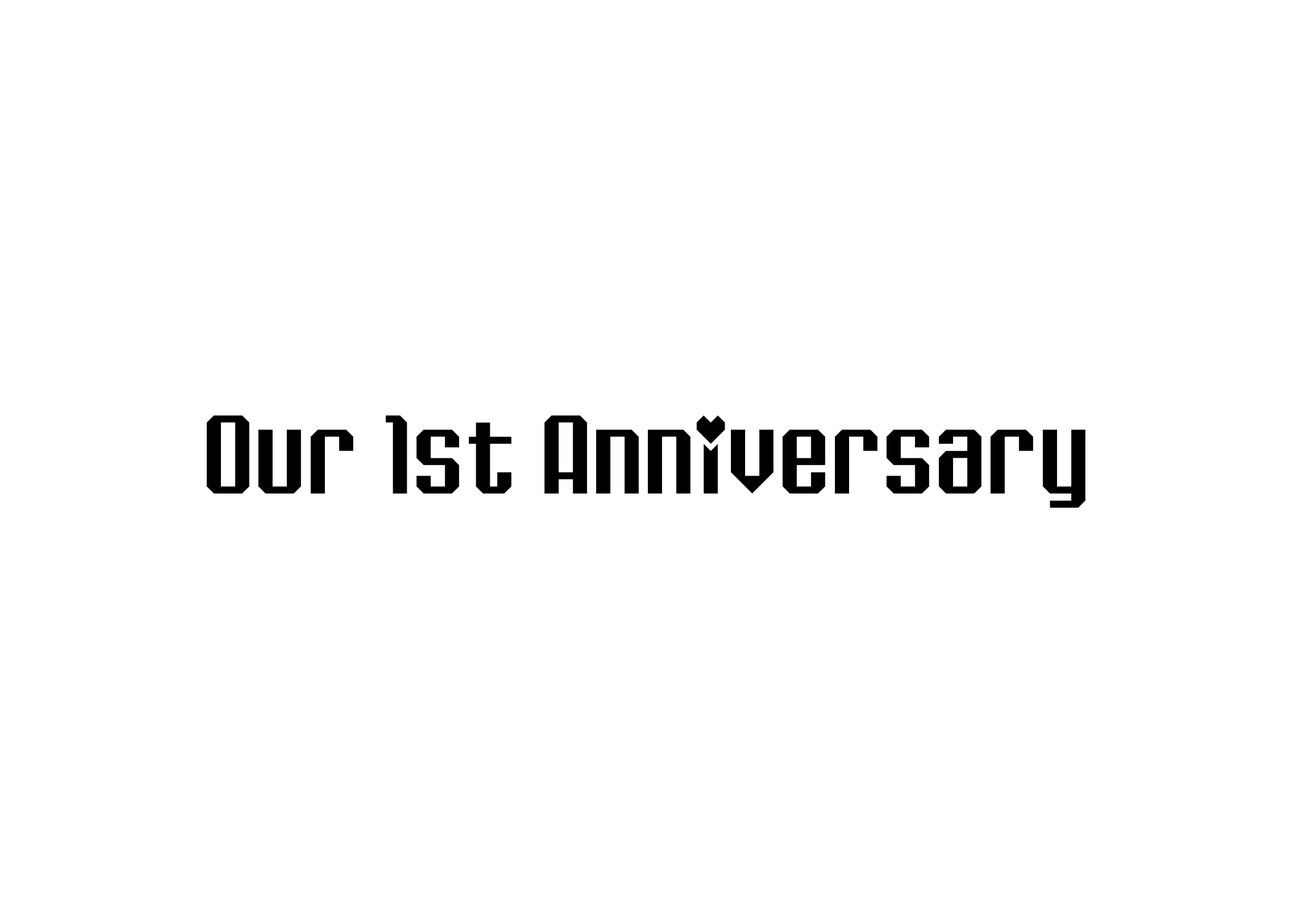
<style>
.page{position:relative;width:1292px;height:923px;background:#ffffff}
.page>*{position:absolute;margin:0}
.t1{font:92.3px "ChiptuneValentine";letter-spacing:0.025em;color:#000000}
</style>
<div class="page">
<p class="t1" style="left:207px;top:415px;width:879px;height:93px">Our 1st Anniversary</p>
</div>
